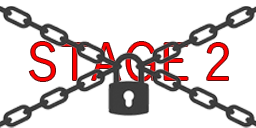
<style>
.page{position:relative;width:256px;height:128px;background:#ffffff}
.page>*{position:absolute;margin:0}
.t1{font:50px "YuGothic-Regular"}
</style>
<div class="page">
<p class="t1" style="left:29px;top:42px;width:199px;height:39px">STAGE 2</p>
</div>
